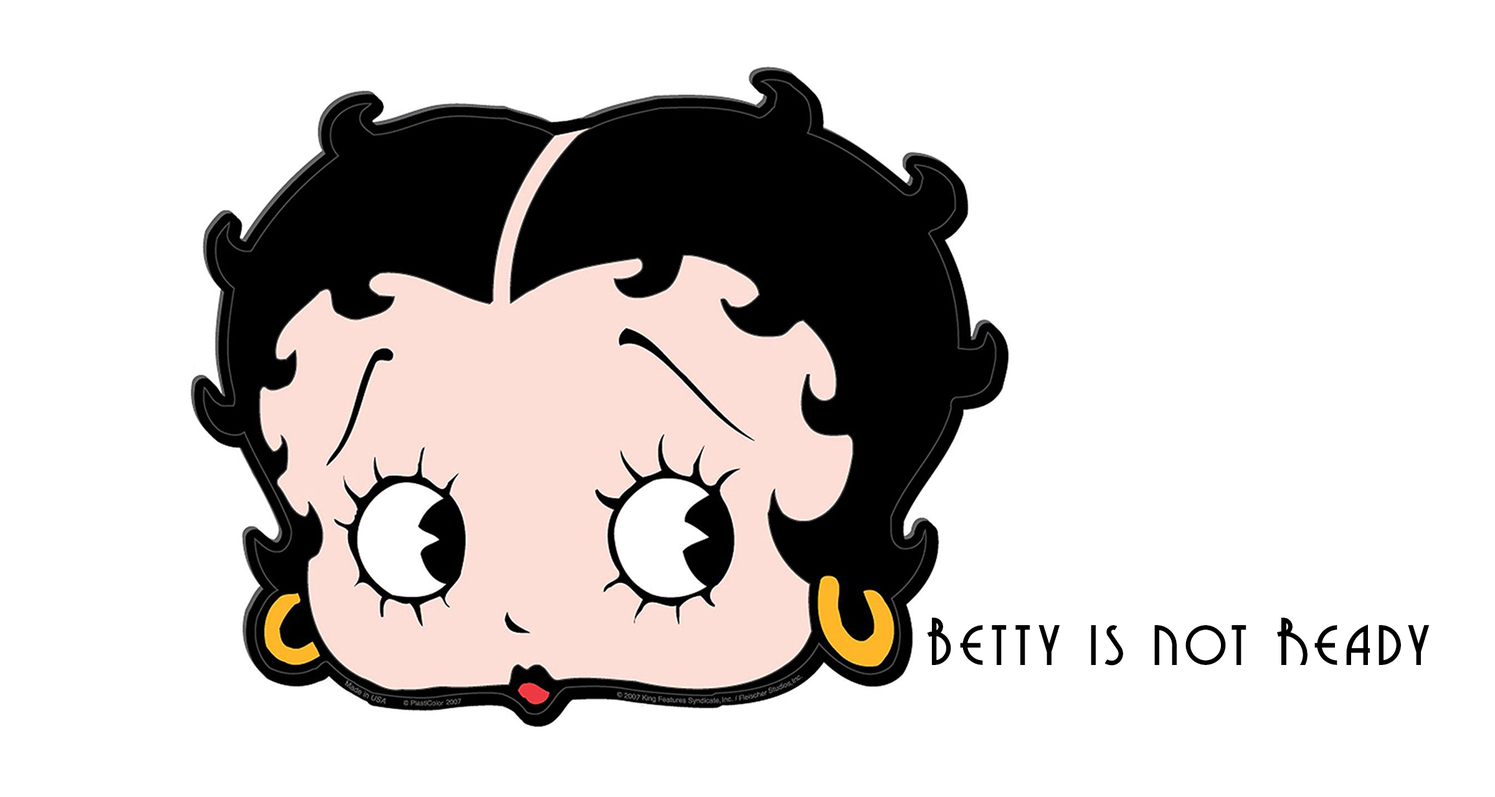
<style>
.page{position:relative;width:1495px;height:797px;background:#ffffff}
.page>*{position:absolute;margin:0}
.t1{font:62.3px "GrenadierNF";letter-spacing:0.1em;color:#000000}
</style>
<div class="page">
<p class="t1" style="left:927px;top:618px;width:503px;height:48px">Betty is not Ready</p>
</div>
